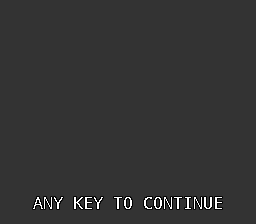
<style>
.page{position:relative;width:256px;height:224px;background:#333333}
.page>*{position:absolute;margin:0}
.t1{font:16.7px "NotoMono";color:#ffffff}
</style>
<div class="page">
<p class="t1" style="left:33px;top:197px;width:189px;height:12px">ANY KEY TO CONTINUE</p>
</div>
